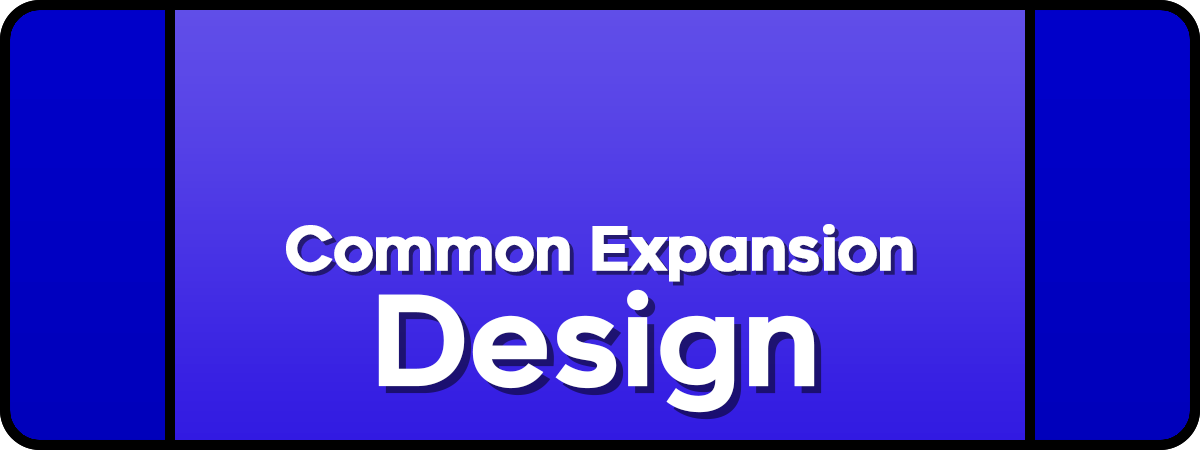
<style>
.page{position:relative;width:1200px;height:450px}
.page>*{position:absolute;margin:0}
.t1{font:60px "Renogare-Regular";letter-spacing:-0.05em;color:#ffffff;font-weight:bold}
.t2{font:125px "Renogare-Regular";letter-spacing:-0.05em;color:#ffffff;font-weight:bold}
</style>
<div class="page">
<p class="t1" style="left:286px;top:224px;width:627px;height:58px">Common Expansion</p>
<p class="t2" style="left:378px;top:289px;width:437px;height:124px">Design</p>
</div>
